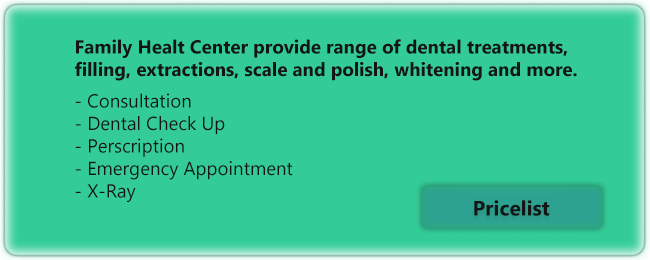
<style>
.page{position:relative;width:650px;height:260px;background:#33cc99}
.page>*{position:absolute;margin:0}
.t1{font:18.8px "Gadugi-Bold";color:#151515}
.t2{font:18.8px "Gadugi";color:#151515}
.t3{font:20.8px "Gadugi-Bold";color:#151515}
</style>
<div class="page">
<p class="t1" style="left:75px;top:39px;width:502px;height:42px">Family Healt Center provide range of dental treatments,<br>filling, extractions, scale and polish, whitening and more.</p>
<p class="t2" style="left:75px;top:93px;width:218px;height:109px">- Consultation<br>- Dental Check Up<br>- Perscription<br>- Emergency Appointment<br>- X-Ray</p>
<p class="t3" style="left:474px;top:200px;width:76px;height:16px">Pricelist</p>
</div>
